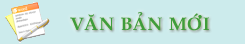
<style>
.page{position:relative;width:245px;height:44px;background:#ccebec}
.page>*{position:absolute;margin:0}
.t1{font:18px "VNI-Palatin-Bold";color:#3f9d3a}
</style>
<div class="page">
<p class="t1" style="left:70px;top:12px;width:139px;height:19px">VAÊN BAÛN MÔÙI</p>
</div>
